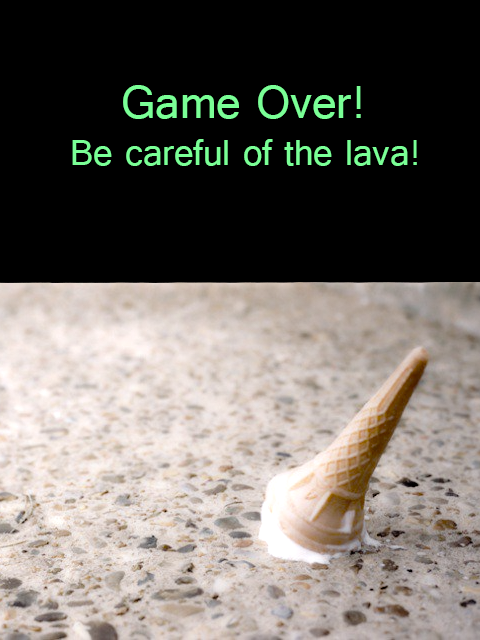
<style>
.page{position:relative;width:480px;height:640px;background:#000000}
.page>*{position:absolute;margin:0}
.t1{font:38.9px "Raavi";color:#7aff96}
.t2{font:48.6px "Raavi";color:#7aff96}
</style>
<div class="page">
<p class="t1" style="left:72px;top:85px;width:345px;height:81px"><span class="t2">  Game Over!<br></span>Be careful of the lava!</p>
</div>
